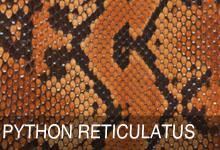
<style>
.page{position:relative;width:220px;height:150px}
.page>*{position:absolute;margin:0}
.t1{font:19.4px "Helvetica";color:#fcf9f9;scale:0.88 1}
</style>
<div class="page">
<p class="t1" style="left:3px;top:124px;width:192px;height:15px">PYTHON RETICULATUS</p>
</div>
